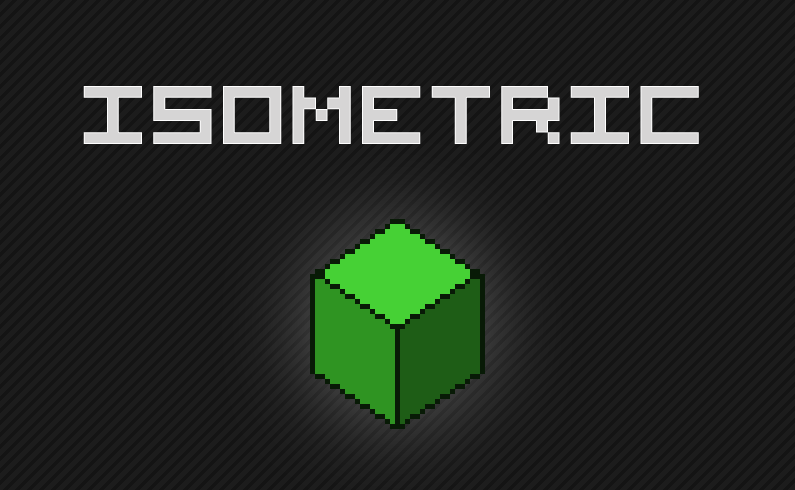
<style>
.page{position:relative;width:795px;height:490px;background:#1c1c1c}
.page>*{position:absolute;margin:0}
.t1{font:116px "VisitorTT1BRK";color:#d6d5d5}
</style>
<div class="page">
<p class="t1" style="left:83px;top:86px;width:616px;height:58px">ISOMETRIC</p>
</div>
